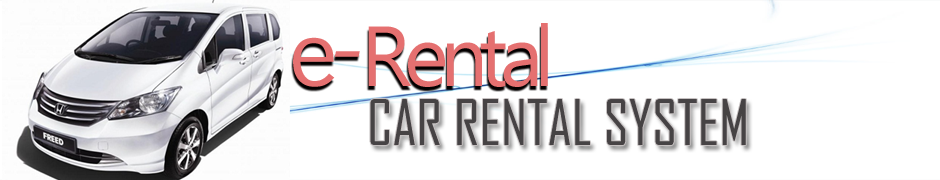
<style>
.page{position:relative;width:940px;height:180px;background:#ffffff}
.page>*{position:absolute;margin:0}
.t1{font:85px "Ebrima";letter-spacing:-0.1em;color:#e57070}
.t2{font:90px "EuphemiaCAS";letter-spacing:-0.1em;color:#e57070;scale:1.03 1}
.t3{font:60px "AgencyFB-Reg";color:#464345;text-transform:uppercase}
</style>
<div class="page">
<p class="t1" style="left:368px;top:23px;width:180px;height:64px">Rental</p>
<p class="t2" style="left:293px;top:37px;width:67px;height:50px">e-</p>
<p class="t3" style="left:370px;top:99px;width:376px;height:46px">CAR RENTAL SYSTEM</p>
</div>
